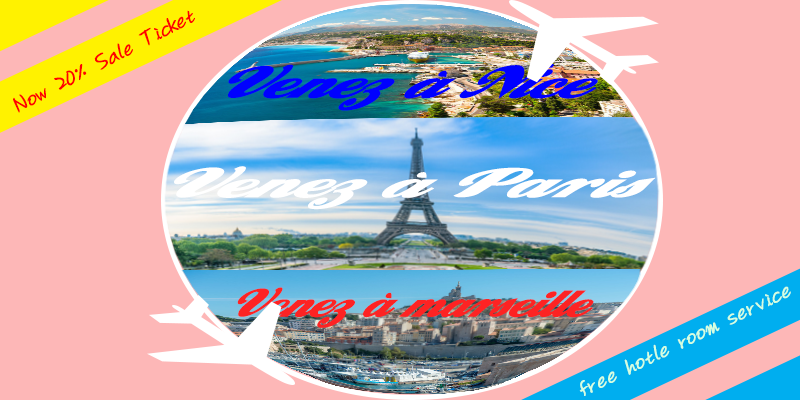
<style>
.page{position:relative;width:800px;height:400px;background:#fdb7b7}
.page>*{position:absolute;margin:0}
.t1{font:30px "BBTreeCB";color:#ff0000}
.t2{font:48px "BBTreeGB";color:#ff0000}
.t3{font:78.7px "Creampuff";color:#0000ff;scale:0.79 1}
.t4{font:74.5px "Creampuff";color:#ffffff}
.t5{font:60px "Creampuff";color:#fd2323;scale:0.73 1}
.t6{font:30px "BBTreeCB";color:#d5ffdf}
</style>
<div class="page">
<p class="t1" style="left:13px;top:10px;width:182px;height:103px;rotate:-27deg"><span class="t2">    </span>Now 20% Sale Ticket</p>
<p class="t3" style="left:228px;top:63px;width:370px;height:48px">Venez à Nice</p>
<p class="t4" style="left:174px;top:166px;width:482px;height:44px">Venez à Paris</p>
<p class="t5" style="left:237px;top:287px;width:357px;height:41px">Venez à marseille</p>
<p class="t6" style="left:579px;top:286px;width:212px;height:110px;rotate:-26deg"><span class="t1">       </span>free hotle room service</p>
</div>
